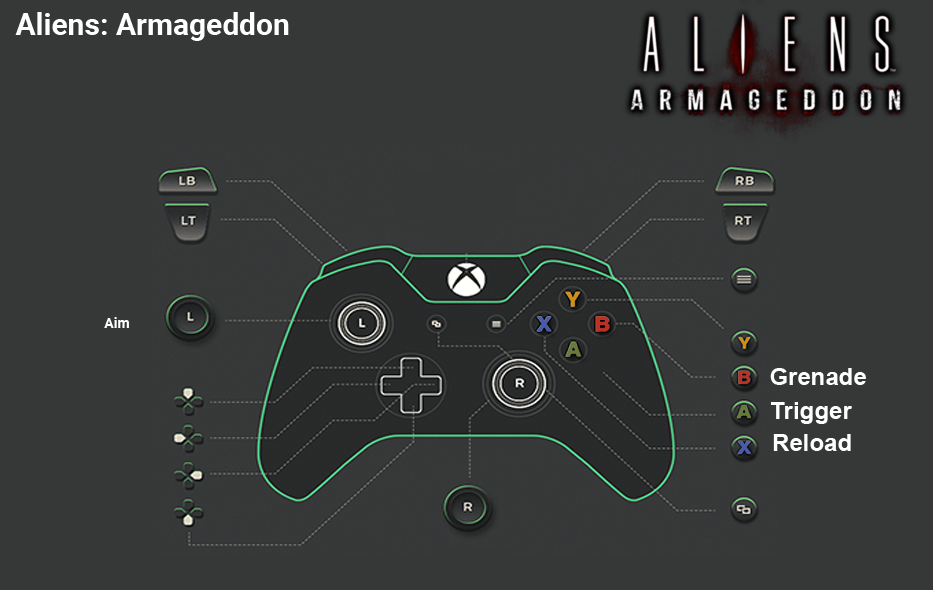
<style>
.page{position:relative;width:933px;height:590px;background:#363838}
.page>*{position:absolute;margin:0}
.t1{font:30px "Roboto-Bold";color:#ffffff}
.t2{font:14px "Roboto-Bold";color:#fefefe}
.t3{font:24px "Arial-BoldMT";color:#fefefe}
</style>
<div class="page">
<p class="t1" style="left:15px;top:12px;width:274px;height:29px">Aliens: Armageddon</p>
<p class="t2" style="left:104px;top:317px;width:25px;height:11px">Aim</p>
<p class="t3" style="left:770px;top:368px;width:96px;height:17px">Grenade</p>
<p class="t3" style="left:771px;top:402px;width:81px;height:22px">Trigger</p>
<p class="t3" style="left:773px;top:434px;width:78px;height:17px">Reload</p>
</div>
